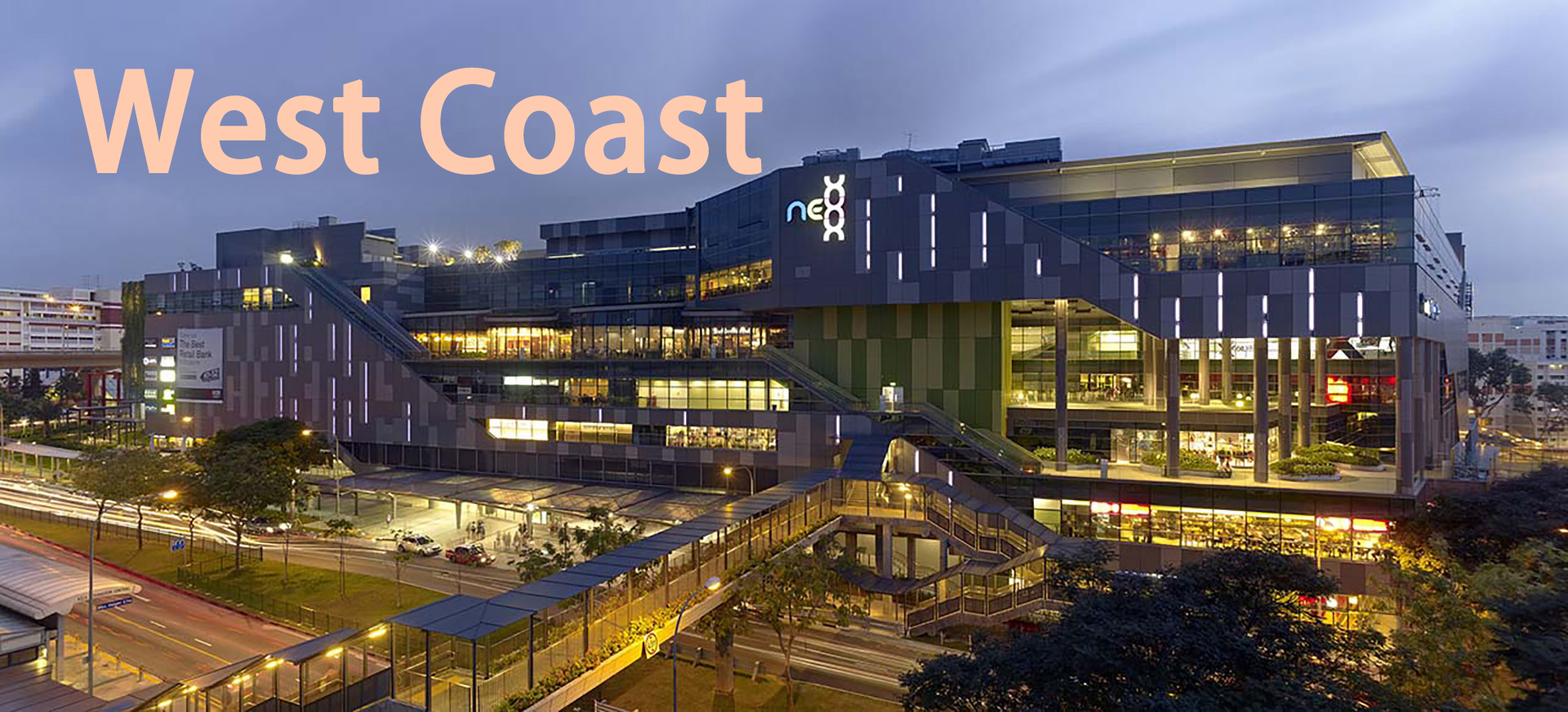
<style>
.page{position:relative;width:1568px;height:712px}
.page>*{position:absolute;margin:0}
.t1{font:131.1px "AdobeHeitiStd-Regular";color:#ffcbaf;font-weight:bold}
</style>
<div class="page">
<p class="t1" style="left:74px;top:67px;width:689px;height:108px">West Coast</p>
</div>
